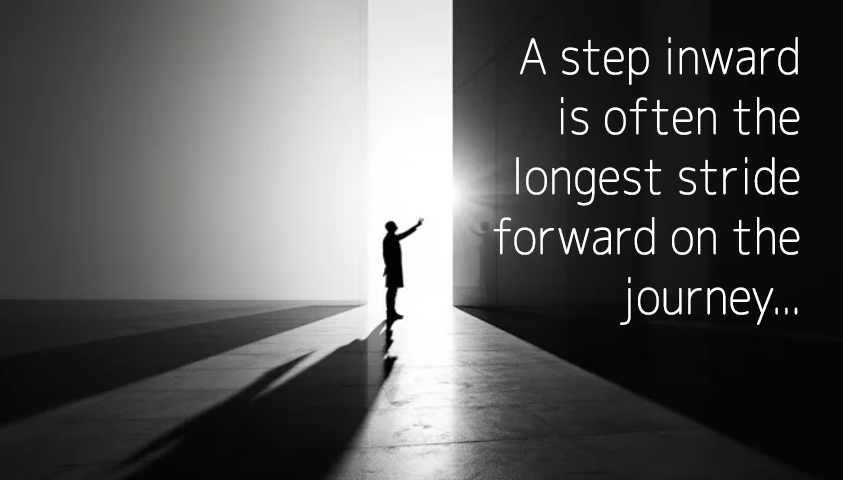
<style>
.page{position:relative;width:843px;height:480px}
.page>*{position:absolute;margin:0}
.t1{font:48px/60px "RoundedMplus1c-Thin";color:#ffffff;font-weight:bold;scale:0.9 1}
</style>
<div class="page">
<p class="t1" style="left:493px;top:37px;width:307px;height:288px;text-align:right">A step inward is often the longest stride forward on the journey...</p>
</div>
